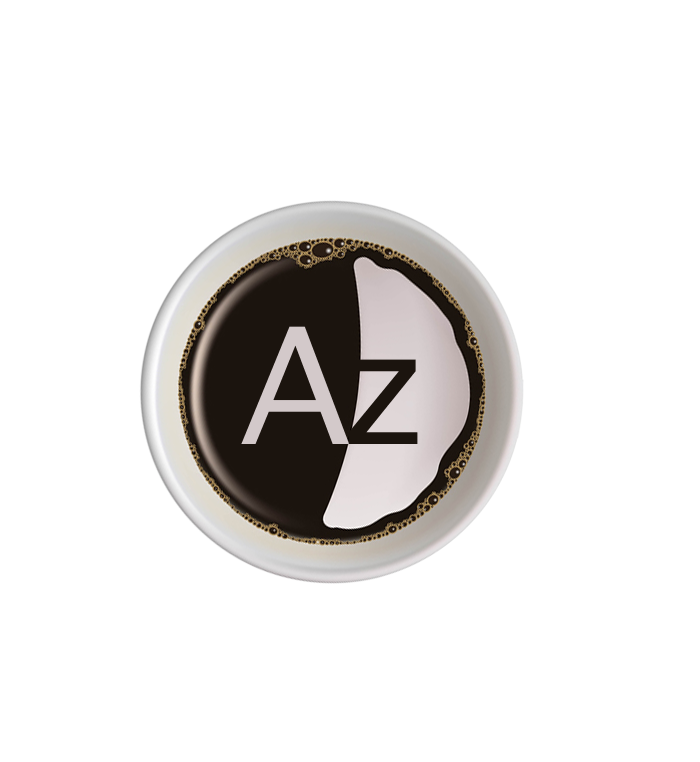
<style>
.page{position:relative;width:700px;height:762px;background:#ffffff}
.page>*{position:absolute;margin:0}
.t1{font:218px "AppleSymbols";color:#d3c9ca}
.t2{font:218px "AppleSymbols";color:#1b140e}
</style>
<div class="page">
<p class="t1" style="left:241px;top:326px;width:108px;height:118px">A</p>
<p class="t2" style="left:348px;top:359px;width:70px;height:85px">z</p>
</div>
